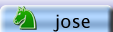
<style>
.page{position:relative;width:113px;height:32px}
.page>*{position:absolute;margin:0}
.t1{font:18px "LucidaSansUnicode";color:#000000}
</style>
<div class="page">
<p class="t1" style="left:53px;top:14px;width:37px;height:18px">jose</p>
</div>
